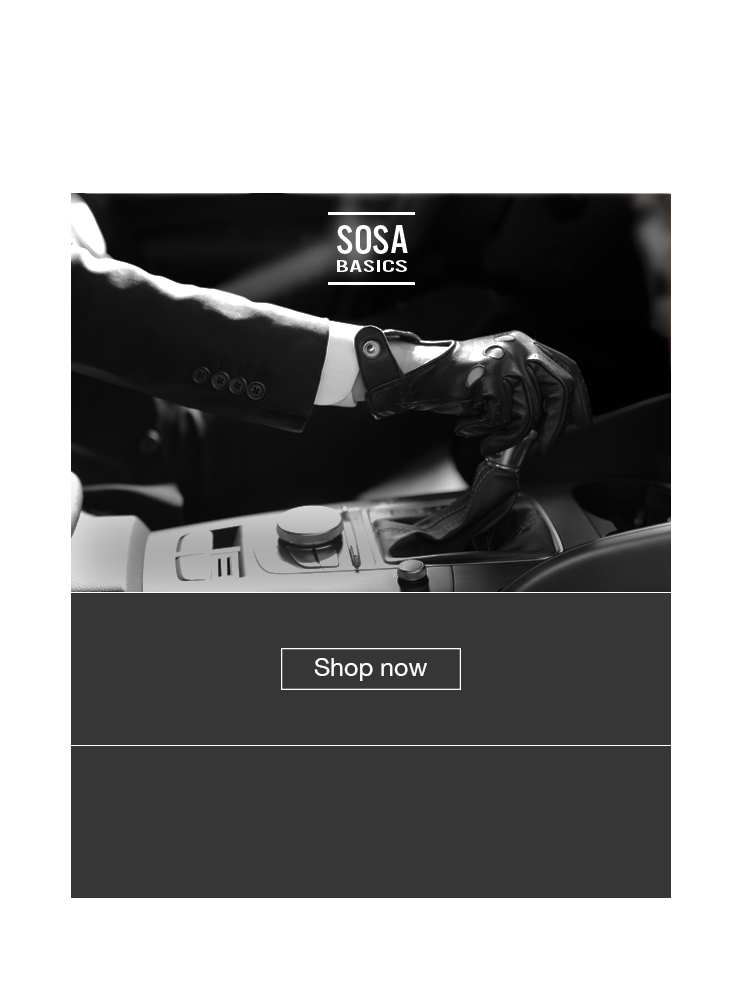
<style>
.page{position:relative;width:742px;height:1000px;background:#ffffff}
.page>*{position:absolute;margin:0}
.t1{font:40.3px "AlternateGotNo3D";color:#ffffff}
.t2{font:16.5px "AlternateGotNo3D";color:#ffffff;scale:1.8 1}
.t3{font:25px "HelveticaNeue";color:#fefdfb}
</style>
<div class="page">
<p class="t1" style="left:337px;top:225px;width:71px;height:29px">SOSA</p>
<p class="t2" style="left:337px;top:260px;width:70px;height:12px">BASICS</p>
<p class="t3" style="left:314px;top:658px;width:113px;height:23px">Shop now</p>
</div>
